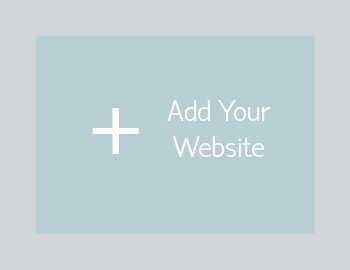
<style>
.page{position:relative;width:350px;height:270px;background:#b8ced3}
.page>*{position:absolute;margin:0}
.t1{font:30px/36px "HattoriHanzo-Light";color:#fdffff}
.t2{font:100px "HattoriHanzo-Light";color:#ffffff}
</style>
<div class="page">
<p class="t1" style="left:167px;top:100px;width:103px;height:57px;text-align:center">Add Your<br>Website</p>
<p class="t2" style="left:92px;top:108px;width:47px;height:46px">+</p>
</div>
